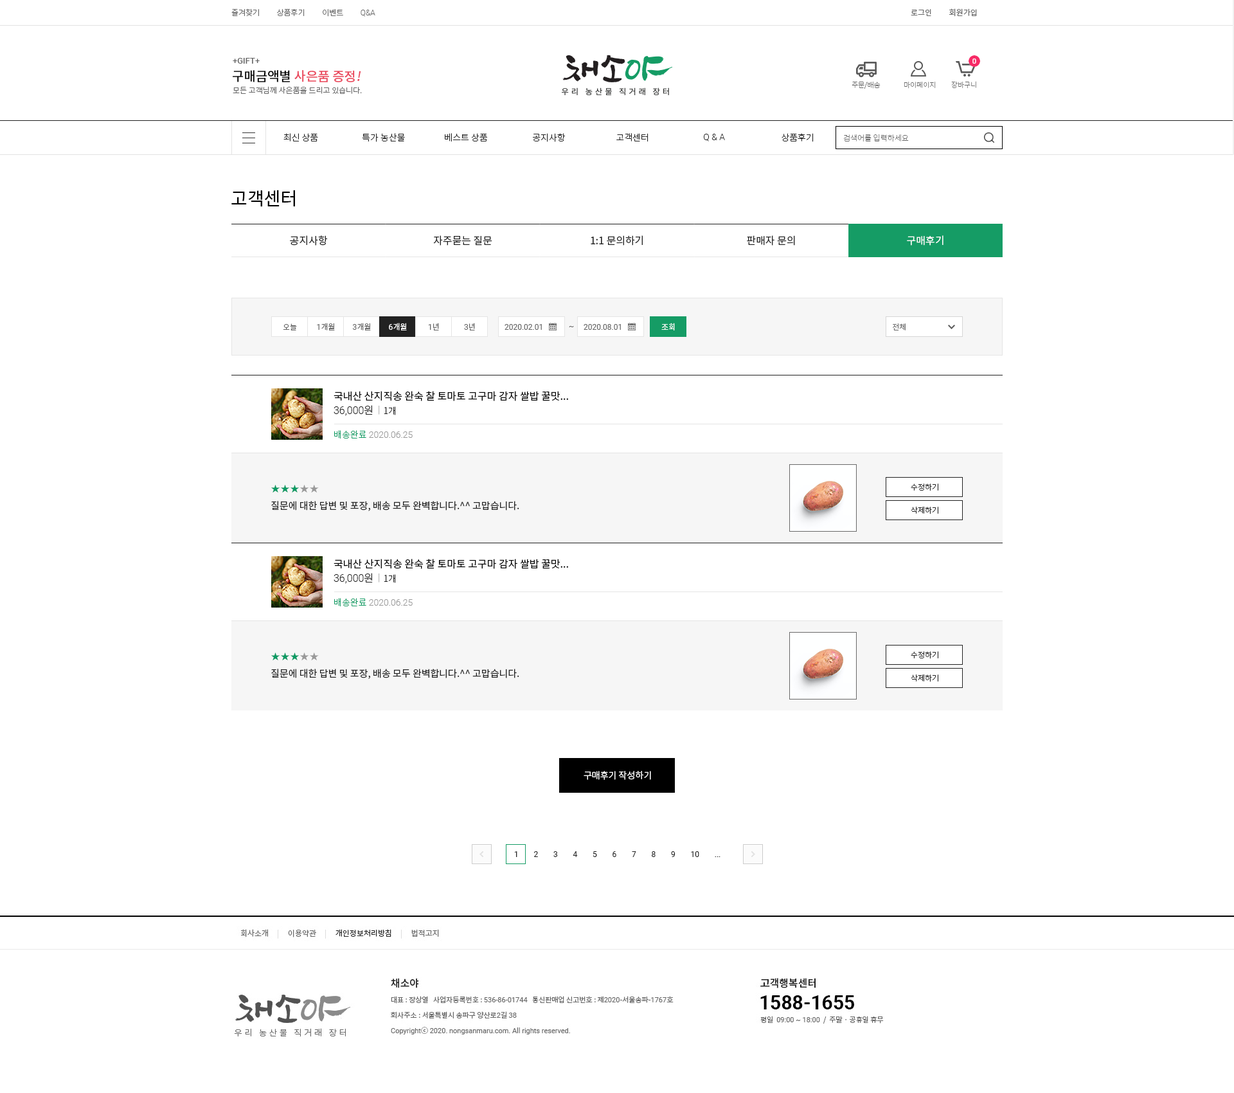
<style>
.page{position:relative;width:1234px;height:1093px;background:#ffffff}
.page>*{position:absolute;margin:0}
.t1{font:7.7px "NotoSansCJKkr-Light";color:#666666}
.t2{font:7.7px "Roboto-Light";color:#666666}
.t3{font:7.7px "NotoSansCJKkr-DemiLight";color:#666666}
.t4{font:8.4px "Roboto-Medium";color:#666666}
.t5{font:12.9px "NotoSansCJKkr-Medium";color:#ea475c}
.t6{font:12.9px "NotoSansCJKkr-Medium";color:#000000}
.t7{font:12.9px "NotoSansCJKkr-Medium";color:#ea475c;font-style:italic}
.t8{font:7.1px "NotoSansCJKkr-Thin";color:#666666}
.t9{font:9px "NotoSansCJKkr-Light";color:#222222}
.t10{font:9px "Roboto-Light";color:#222222}
.t11{font:7.7px "NotoSansCJKkr-Thin";color:#666666}
.t12{font:18px "NotoSansCJKkr-Regular";color:#000000}
.t13{font:10.3px "NotoSansCJKkr-Regular";color:#222222}
.t14{font:10.3px "NotoSansCJKkr-Regular";color:#ffffff}
.t15{font:7.7px "NotoSansCJKkr-Regular";color:#666666}
.t16{font:7.7px "Roboto-Regular";color:#666666}
.t17{font:7.7px "NotoSansCJKkr-Regular";color:#ffffff}
.t18{font:7.7px "Roboto-Regular";color:#ffffff}
.t19{font:10.3px "NotoSansCJKkr-Regular";color:#000000}
.t20{font:10.3px "Roboto-Light";color:#222222}
.t21{font:10.3px "NotoSansCJKkr-Light";color:#222222}
.t22{font:7.7px "NotoSansCJKkr-Light";color:#999999}
.t23{font:9px "Roboto-Light";color:#999999}
.t24{font:9px "NotoSansCJKkr-Light";color:#159c65}
.t25{font:10.3px "NanumGothicLight";color:#0b9a63}
.t26{font:10.3px "NanumGothicLight";color:#999999}
.t27{font:7.7px "NotoSansCJKkr-Light";color:#222222}
.t28{font:9.6px "NotoSansCJKkr-Regular";color:#222222}
.t29{font:9px "NotoSansCJKkr-DemiLight";color:#ffffff}
.t30{font:7.7px "Roboto-Regular";color:#222222}
</style>
<div class="page">
<p class="t1" style="left:231px;top:8px;width:144px;height:9px">즐겨찾기          상품후기          이벤트          <span class="t2">Q&amp;A</span></p>
<p class="t3" style="left:911px;top:8px;width:66px;height:9px">로그인          회원가입</p>
<p class="t4" style="left:233px;top:58px;width:27px;height:6px">+GIFT+</p>
<p class="t5" style="left:233px;top:70px;width:128px;height:12px"><span class="t6">구매금액별 </span>사은품 증정<span class="t7">!</span></p>
<p class="t1" style="left:233px;top:86px;width:129px;height:8px">모든 고객님께 사은품을 드리고 있습니다.</p>
<p class="t8" style="left:852px;top:81px;width:29px;height:8px">주문/배송</p>
<p class="t8" style="left:904px;top:82px;width:32px;height:7px">마이페이지</p>
<p class="t8" style="left:951px;top:81px;width:26px;height:8px">장바구니</p>
<p class="t9" style="left:284px;top:133px;width:34px;height:8px">최신 상품</p>
<p class="t9" style="left:362px;top:133px;width:43px;height:9px">특가 농산물</p>
<p class="t9" style="left:445px;top:133px;width:43px;height:9px">베스트 상품</p>
<p class="t9" style="left:533px;top:133px;width:33px;height:9px">공지사항</p>
<p class="t9" style="left:617px;top:133px;width:32px;height:9px">고객센터</p>
<p class="t10" style="left:704px;top:134px;width:21px;height:7px">Q &amp; A</p>
<p class="t9" style="left:782px;top:133px;width:32px;height:9px">상품후기</p>
<p class="t11" style="left:843px;top:134px;width:66px;height:8px">검색어를 입력하세요</p>
<p class="t12" style="left:231px;top:190px;width:64px;height:17px">고객센터</p>
<p class="t13" style="left:290px;top:235px;width:38px;height:11px">공지사항</p>
<p class="t13" style="left:433px;top:235px;width:59px;height:11px">자주묻는 질문</p>
<p class="t13" style="left:591px;top:235px;width:52px;height:11px">1:1 문의하기</p>
<p class="t13" style="left:747px;top:235px;width:48px;height:11px">판매자 문의</p>
<p class="t14" style="left:907px;top:235px;width:37px;height:11px">구매후기</p>
<p class="t15" style="left:283px;top:323px;width:14px;height:7px">오늘</p>
<p class="t15" style="left:317px;top:323px;width:18px;height:7px"><span class="t16">1</span>개월</p>
<p class="t15" style="left:352px;top:323px;width:19px;height:7px"><span class="t16">3</span>개월</p>
<p class="t17" style="left:389px;top:323px;width:18px;height:7px"><span class="t18">6</span>개월</p>
<p class="t16" style="left:428px;top:323px;width:11px;height:7px">1<span class="t15">년</span></p>
<p class="t16" style="left:464px;top:323px;width:11px;height:7px">3<span class="t15">년</span></p>
<p class="t16" style="left:505px;top:324px;width:37px;height:6px">2020.02.01</p>
<p class="t16" style="left:569px;top:326px;width:5px;height:1px">~</p>
<p class="t16" style="left:584px;top:324px;width:37px;height:6px">2020.08.01</p>
<p class="t17" style="left:662px;top:323px;width:13px;height:7px">조회</p>
<p class="t1" style="left:893px;top:323px;width:13px;height:7px">전체</p>
<p class="t19" style="left:334px;top:391px;width:234px;height:10px">국내산 산지직송 완숙 찰 토마토 고구마 감자 쌀밥 꿀맛...</p>
<p class="t20" style="left:334px;top:405px;width:62px;height:11px">36,000<span class="t21">원  </span><span class="t22">|  </span><span class="t9">1개</span></p>
<p class="t23" style="left:334px;top:430px;width:79px;height:9px"><span class="t24">배송완료 </span>2020.06.25</p>
<p class="t25" style="left:271px;top:485px;width:48px;height:7px">★★★<span class="t26">★★</span></p>
<p class="t27" style="left:911px;top:483px;width:28px;height:8px">수정하기</p>
<p class="t28" style="left:271px;top:501px;width:248px;height:10px">질문에 대한 답변 및 포장, 배송 모두 완벽합니다.^^ 고맙습니다.</p>
<p class="t27" style="left:911px;top:506px;width:28px;height:8px">삭제하기</p>
<p class="t19" style="left:334px;top:559px;width:234px;height:10px">국내산 산지직송 완숙 찰 토마토 고구마 감자 쌀밥 꿀맛...</p>
<p class="t20" style="left:334px;top:573px;width:62px;height:11px">36,000<span class="t21">원  </span><span class="t22">|  </span><span class="t9">1개</span></p>
<p class="t23" style="left:334px;top:598px;width:79px;height:9px"><span class="t24">배송완료 </span>2020.06.25</p>
<p class="t25" style="left:271px;top:653px;width:48px;height:7px">★★★<span class="t26">★★</span></p>
<p class="t27" style="left:911px;top:651px;width:28px;height:8px">수정하기</p>
<p class="t28" style="left:271px;top:669px;width:248px;height:10px">질문에 대한 답변 및 포장, 배송 모두 완벽합니다.^^ 고맙습니다.</p>
<p class="t27" style="left:911px;top:674px;width:28px;height:8px">삭제하기</p>
<p class="t29" style="left:584px;top:771px;width:67px;height:9px">구매후기 작성하기</p>
<p class="t30" style="left:514px;top:851px;width:207px;height:6px">1        2        3        4        5        6        7        8        9        10        ...</p>
</div>
